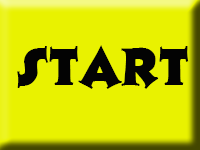
<style>
.page{position:relative;width:200px;height:150px;background:#e9f200}
.page>*{position:absolute;margin:0}
.t1{font:50px "Colbert";color:#030303}
</style>
<div class="page">
<p class="t1" style="left:17px;top:45px;width:172px;height:44px">START</p>
</div>
